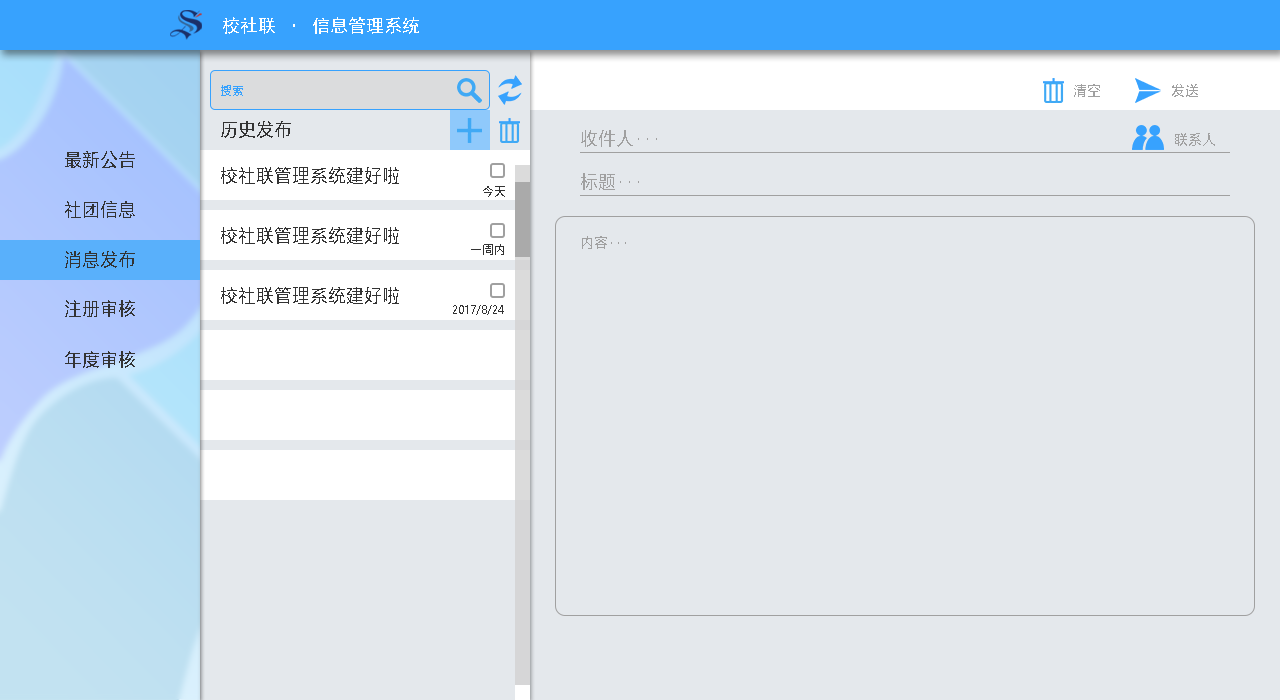
<style>
.page{position:relative;width:1280px;height:700px;background:#e4e8ec}
.page>*{position:absolute;margin:0}
.t1{font:18px "SimHei";color:#ffffff}
.t2{font:12px "MicrosoftYaHei";color:#37a2fe}
.t3{font:14px "MicrosoftYaHei";color:#a0a0a0}
.t4{font:18px "MicrosoftYaHei";color:#333333}
.t5{font:18px "MicrosoftYaHei";color:#a0a0a0}
.t6{font:12px "MicrosoftYaHei";color:#333333}
</style>
<div class="page">
<p class="t1" style="left:223px;top:17px;width:196px;height:17px">校社联 · 信息管理系统</p>
<p class="t2" style="left:221px;top:85px;width:22px;height:11px">搜索</p>
<p class="t3" style="left:1074px;top:84px;width:26px;height:13px">清空</p>
<p class="t3" style="left:1172px;top:84px;width:26px;height:13px">发送</p>
<p class="t4" style="left:221px;top:121px;width:70px;height:17px">历史发布</p>
<p class="t5" style="left:581px;top:130px;width:76px;height:17px">收件人···</p>
<p class="t3" style="left:1175px;top:133px;width:40px;height:13px">联系人</p>
<p class="t4" style="left:65px;top:151px;width:70px;height:17px">最新公告</p>
<p class="t4" style="left:221px;top:167px;width:178px;height:17px">校社联管理系统建好啦</p>
<p class="t5" style="left:581px;top:173px;width:58px;height:17px">标题···</p>
<p class="t6" style="left:483px;top:186px;width:22px;height:11px">今天</p>
<p class="t4" style="left:65px;top:201px;width:70px;height:17px">社团信息</p>
<p class="t4" style="left:221px;top:227px;width:178px;height:17px">校社联管理系统建好啦</p>
<p class="t6" style="left:471px;top:244px;width:33px;height:11px">一周内</p>
<p class="t3" style="left:582px;top:236px;width:44px;height:13px">内容···</p>
<p class="t4" style="left:65px;top:251px;width:70px;height:17px">消息发布</p>
<p class="t4" style="left:221px;top:287px;width:178px;height:17px">校社联管理系统建好啦</p>
<p class="t4" style="left:65px;top:300px;width:70px;height:17px">注册审核</p>
<p class="t6" style="left:453px;top:305px;width:51px;height:10px">2017/8/24</p>
<p class="t4" style="left:65px;top:351px;width:70px;height:17px">年度审核</p>
</div>
